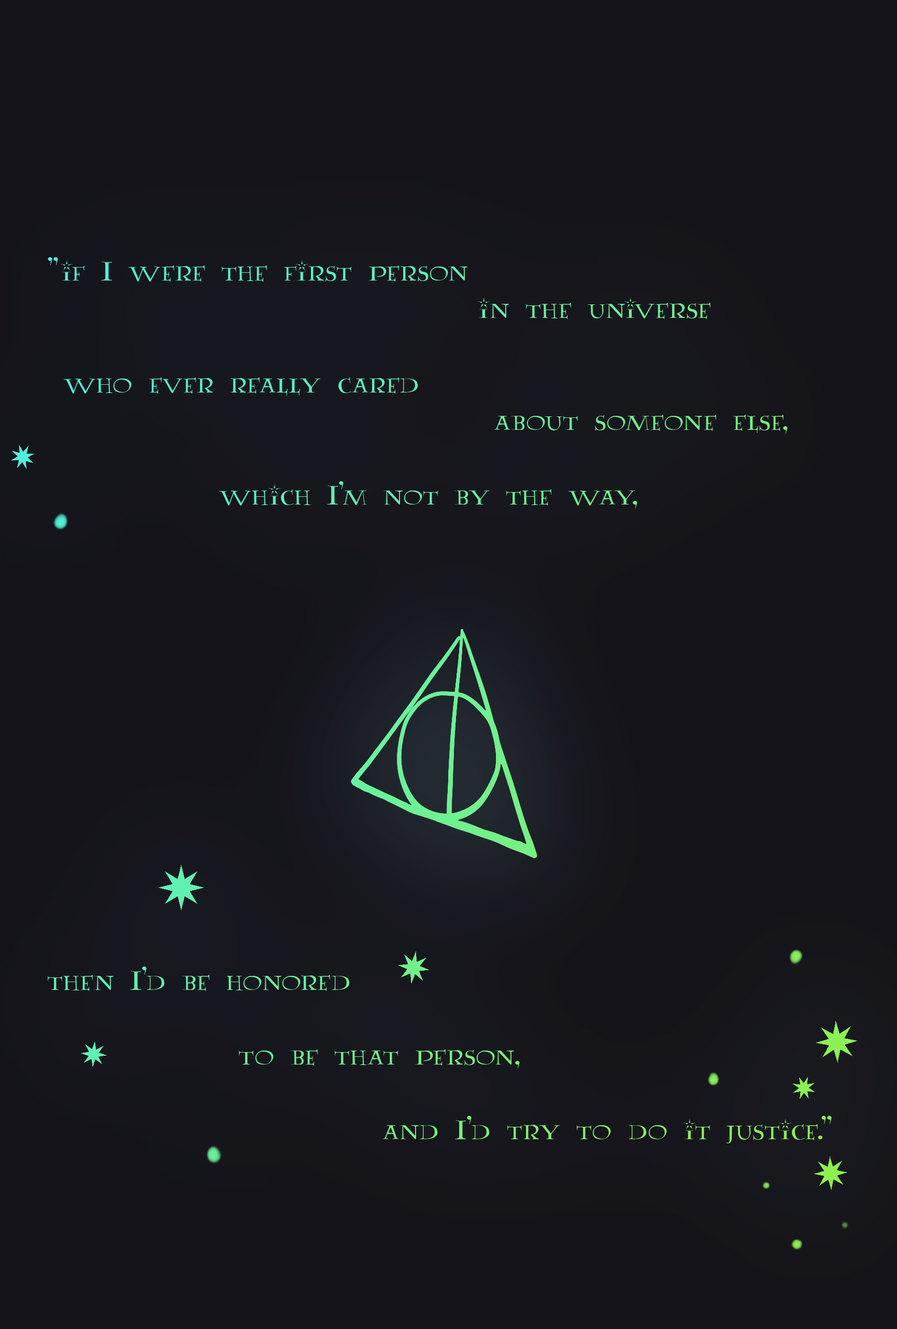
<style>
.page{position:relative;width:897px;height:1329px;background:#141319}
.page>*{position:absolute;margin:0}
.t1{font:31.1px "AA-Lumos-Caps"}
</style>
<div class="page">
<p class="t1" style="left:47px;top:257px;width:785px;height:886px">"if I were the first person <br>                           in the universe <br><br> who ever really cared <br>                            about someone else, <br><br>                          which I'm not by the way, <br> <br><br><br><br><br><br><br><br><br><br><br><br>then I'd be honored <br> <br>            to be that person, <br> <br>                     and I'd try to do it justice."</p>
</div>
